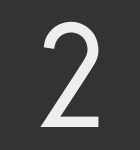
<style>
.page{position:relative;width:140px;height:150px;background:#333333}
.page>*{position:absolute;margin:0}
.t1{font:150px "Champagne&Limousines-Bold";color:#eeeeee}
</style>
<div class="page">
<p class="t1" style="left:40px;top:21px;width:59px;height:106px">2</p>
</div>
